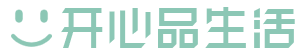
<style>
.page{position:relative;width:300px;height:54px;background:#ffffff}
.page>*{position:absolute;margin:0}
.t1{font:48px "REEJI-Honghuangli-MediumGB1.0";color:#8cc7b5}
</style>
<div class="page">
<p class="t1" style="left:61px;top:7px;width:234px;height:41px">开心品生活</p>
</div>
